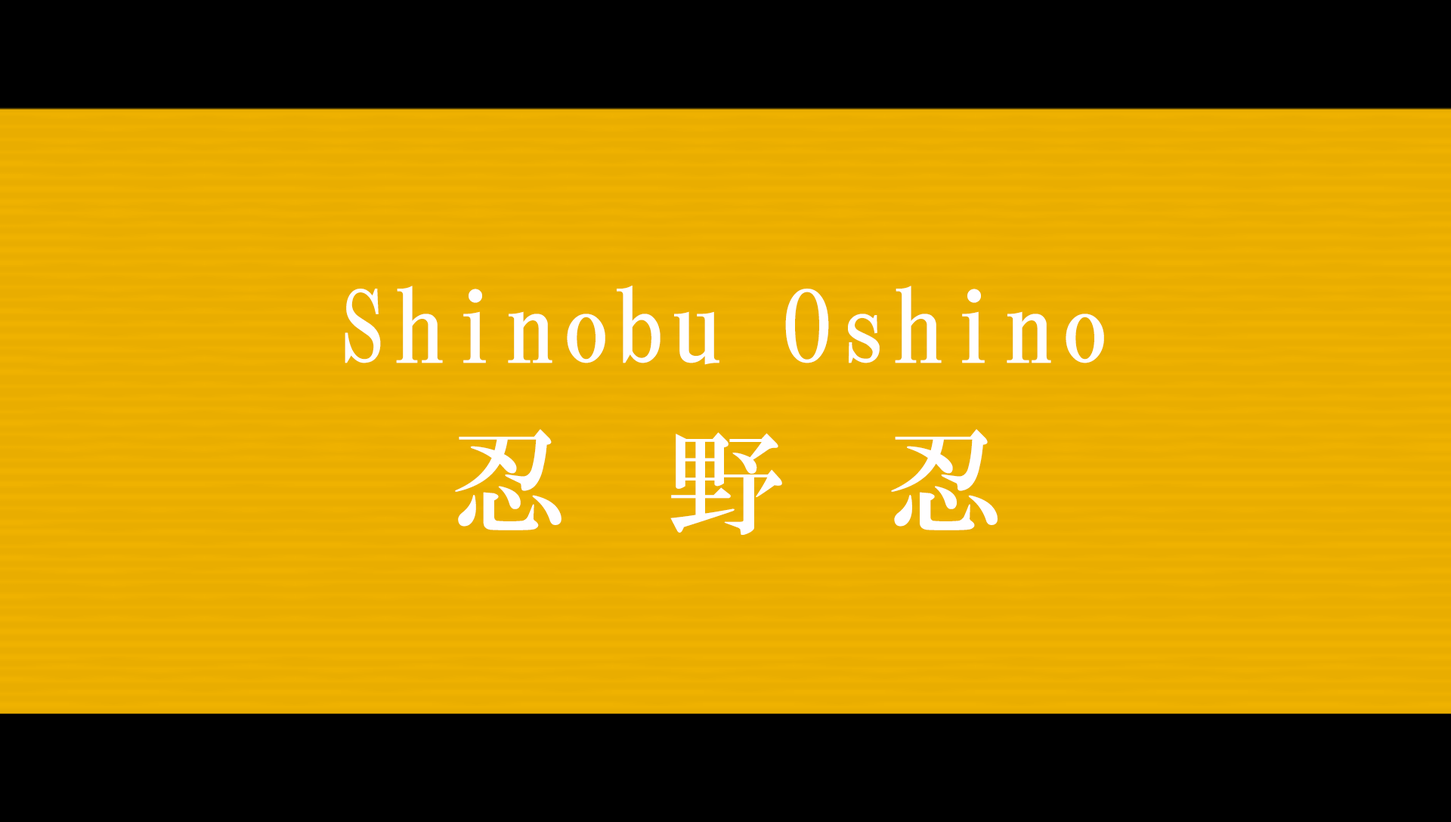
<style>
.page{position:relative;width:1451px;height:822px;background:#e9ad00}
.page>*{position:absolute;margin:0}
.t1{font:100.7px "HGMinchoB";letter-spacing:0.05em;color:#fffeff}
.t2{font:117.9px "HGMinchoB";letter-spacing:0.85em;color:#fffeff}
</style>
<div class="page">
<p class="t1" style="left:345px;top:286px;width:759px;height:79px">Shinobu Oshino</p>
<p class="t2" style="left:455px;top:429px;width:542px;height:106px">忍野忍</p>
</div>
